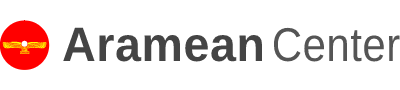
<style>
.page{position:relative;width:400px;height:90px;background:#ffffff}
.page>*{position:absolute;margin:0}
.t1{font:48.3px "LiberationSans-Bold";letter-spacing:0.012em;color:#444444;scale:0.96 1}
.t2{font:47.5px "LiberationSans";letter-spacing:0.012em;color:#555555;scale:0.88 1}
</style>
<div class="page">
<p class="t1" style="left:63px;top:27px;width:200px;height:35px">Aramean</p>
<p class="t2" style="left:273px;top:27px;width:127px;height:35px">Center</p>
</div>
